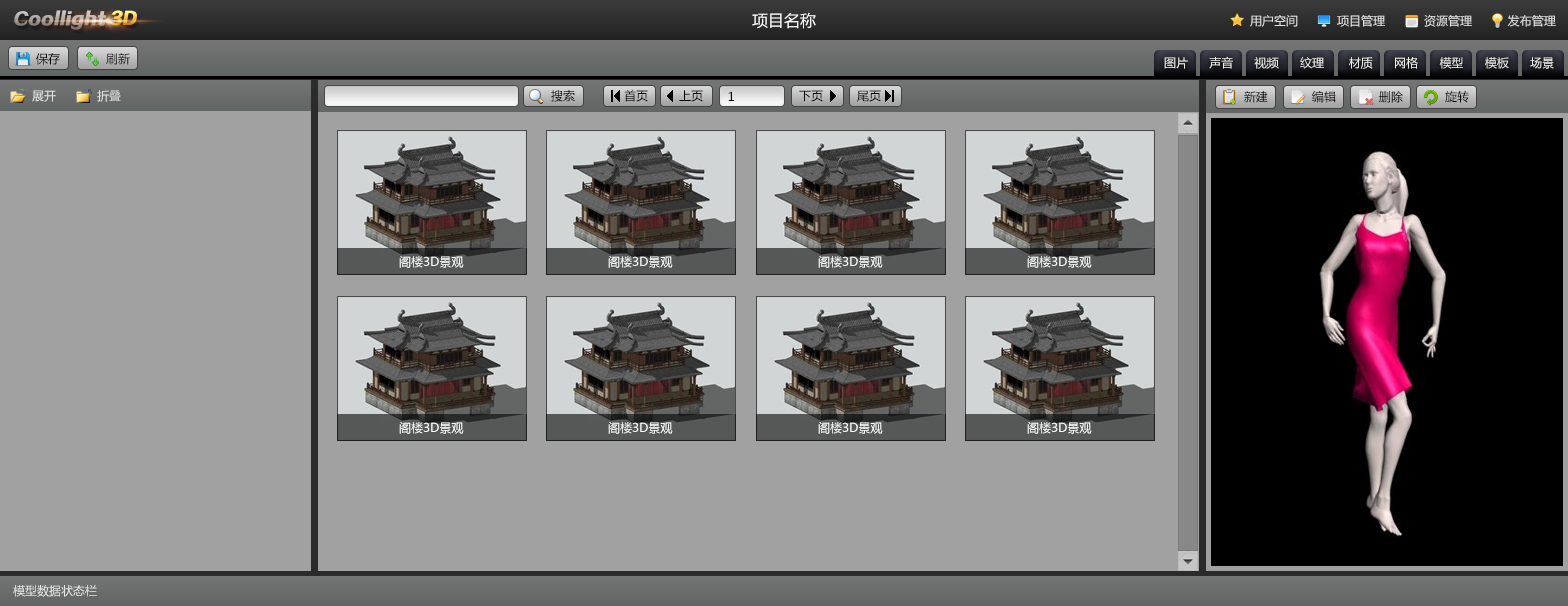
<style>
.page{position:relative;width:1568px;height:606px;background:#a1a1a1}
.page>*{position:absolute;margin:0}
.t1{font:16.6px "FZZDHJW--GB1-0";font-weight:bold;font-style:italic}
.t2{font:16px "MicrosoftYaHei";color:#ffffff}
.t3{font:12px "MicrosoftYaHei";color:#e3e3e3}
.t4{font:12px "MicrosoftYaHei";color:#000000}
.t5{font:12px "MicrosoftYaHei";color:#ececec}
.t6{font:12px "MicrosoftYaHei"}
.t7{font:12px "MicrosoftYaHei";color:#ffffff}
.t8{font:12px "MicrosoftYaHei";color:#e5e5e5}
</style>
<div class="page">
<p class="t1" style="left:14px;top:10px;width:92px;height:20px">Coollight</p>
<p class="t1" style="left:110px;top:10px;width:27px;height:16px">3D</p>
<p class="t2" style="left:752px;top:12px;width:64px;height:17px">项目名称</p>
<p class="t3" style="left:1250px;top:14px;width:306px;height:13px">用户空间           项目管理           资源管理          发布管理</p>
<p class="t4" style="left:36px;top:53px;width:94px;height:12px">保存             刷新</p>
<p class="t5" style="left:1164px;top:56px;width:390px;height:13px">图片      声音      视频      纹理       材质      网格      模型      模板      场景</p>
<p class="t3" style="left:32px;top:90px;width:24px;height:12px">展开</p>
<p class="t3" style="left:97px;top:90px;width:24px;height:12px">折叠</p>
<p class="t4" style="left:551px;top:90px;width:24px;height:12px">搜索</p>
<p class="t4" style="left:624px;top:90px;width:24px;height:12px">首页</p>
<p class="t4" style="left:679px;top:90px;width:24px;height:12px">上页</p>
<p class="t4" style="left:728px;top:91px;width:6px;height:10px">1</p>
<p class="t4" style="left:799px;top:90px;width:24px;height:12px">下页</p>
<p class="t4" style="left:857px;top:90px;width:24px;height:12px">尾页</p>
<p class="t4" style="left:1244px;top:91px;width:24px;height:12px">新建</p>
<p class="t4" style="left:1244px;top:91px;width:24px;height:12px">新建</p>
<p class="t6" style="left:1312px;top:91px;width:24px;height:12px">编辑</p>
<p class="t6" style="left:1379px;top:91px;width:24px;height:12px">删除</p>
<p class="t4" style="left:1445px;top:90px;width:24px;height:13px">旋转</p>
<p class="t7" style="left:399px;top:256px;width:65px;height:12px">阁楼3D景观</p>
<p class="t7" style="left:608px;top:256px;width:65px;height:12px">阁楼3D景观</p>
<p class="t7" style="left:818px;top:256px;width:65px;height:12px">阁楼3D景观</p>
<p class="t7" style="left:1027px;top:256px;width:65px;height:12px">阁楼3D景观</p>
<p class="t8" style="left:13px;top:585px;width:84px;height:12px">模型数据状态栏</p>
</div>
